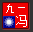
<style>
.page{position:relative;width:33px;height:32px;background:#f20000}
.page>*{position:absolute;margin:0}
.t1{font:10.4px "SimSun";color:#ffffff}
.t2{font:11.7px "SimSun";color:#ffffff}
</style>
<div class="page">
<p class="t1" style="left:6px;top:4px;width:19px;height:9px">九一</p>
<p class="t2" style="left:16px;top:15px;width:11px;height:12px">冯</p>
</div>
